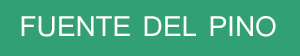
<style>
.page{position:relative;width:300px;height:56px;background:#31a173}
.page>*{position:absolute;margin:0}
.t1{font:30px "Shruti";color:#ffffff;text-transform:uppercase}
</style>
<div class="page">
<p class="t1" style="left:21px;top:16px;width:255px;height:21px">fuente del pino</p>
</div>
